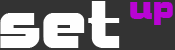
<style>
.page{position:relative;width:175px;height:50px;background:#333333}
.page>*{position:absolute;margin:0}
.t1{font:72px "BolsterBold";color:#fefefe}
.t2{font:36px "BolsterBold";color:#b904d4}
</style>
<div class="page">
<p class="t1" style="left:0px;top:1px;width:120px;height:47px">set</p>
<p class="t2" style="left:130px;top:2px;width:43px;height:23px">up</p>
</div>
